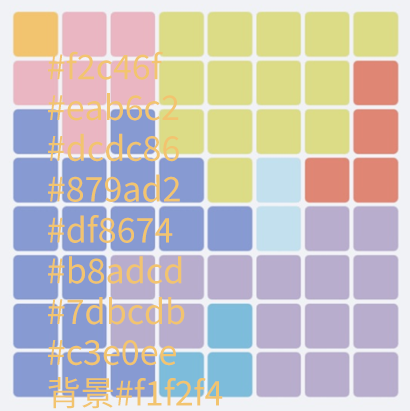
<style>
.page{position:relative;width:410px;height:411px}
.page>*{position:absolute;margin:0}
.t1{font:34px "NotoSansSC-Regular";color:#f2c46f;font-weight:bold}
</style>
<div class="page">
<p class="t1" style="left:48px;top:51px;width:175px;height:358px">#f2c46f<br>#eab6c2<br>#dcdc86<br>#879ad2<br>#df8674<br>#b8adcd<br>#7dbcdb<br>#c3e0ee<br>背景#f1f2f4</p>
</div>
